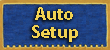
<style>
.page{position:relative;width:110px;height:50px}
.page>*{position:absolute;margin:0}
.t1{font:18px/18px "MyriadPro-Bold";color:#f0d151}
</style>
<div class="page">
<p class="t1" style="left:32px;top:7px;width:46px;height:35px;text-align:center">Auto<br>Setup</p>
</div>
